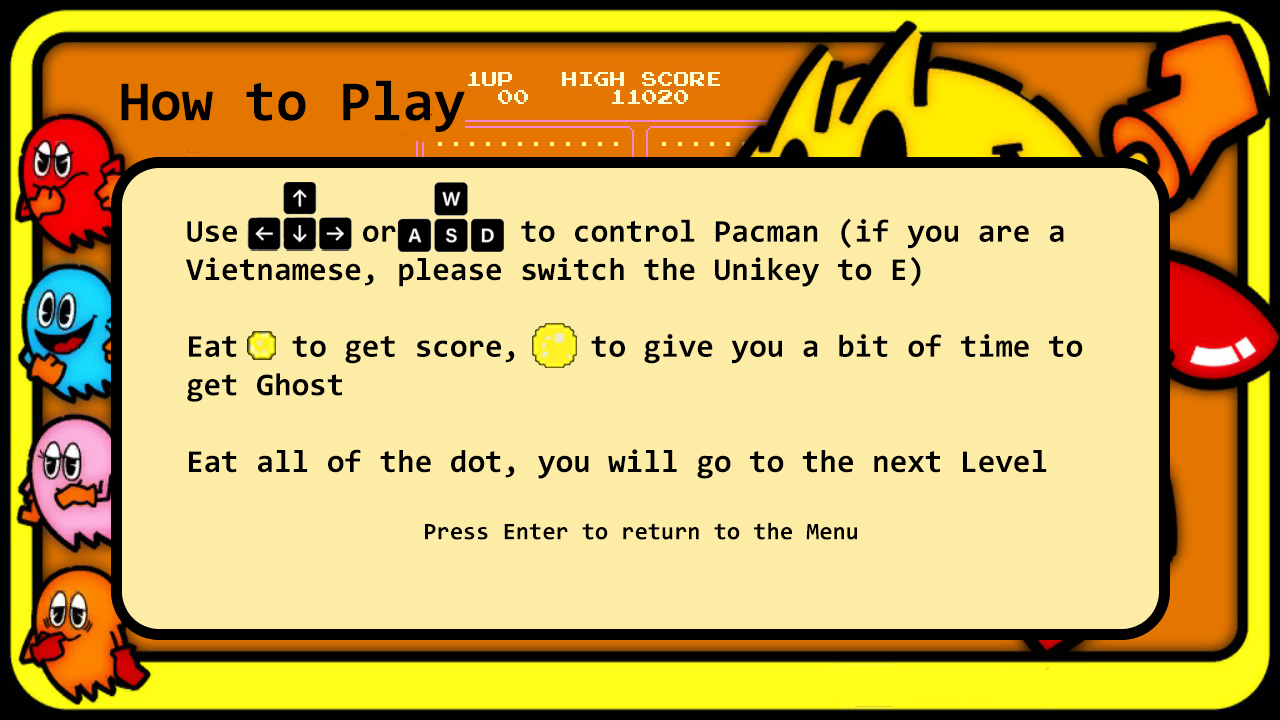
<style>
.page{position:relative;width:1280px;height:720px;background:#fdeca6}
.page>*{position:absolute;margin:0}
.t1{font:57.4px "Consolas-Bold";color:#000000}
.t2{font:32px "Consolas-Bold";color:#000000}
.t3{font:24px "Consolas-Bold";color:#000000}
</style>
<div class="page">
<p class="t1" style="left:121px;top:80px;width:344px;height:52px">How to Play</p>
<p class="t2" style="left:186px;top:218px;width:897px;height:322px">Use       or       to control Pacman (if you are a<br>Vietnamese, please switch the Unikey to E)<br><br>Eat   to get score,    to give you a bit of time to <br>get Ghost<br><br>Eat all of the dot, you will go to the next Level <br><br><span class="t3">                  Press Enter to return to the Menu</span></p>
</div>
